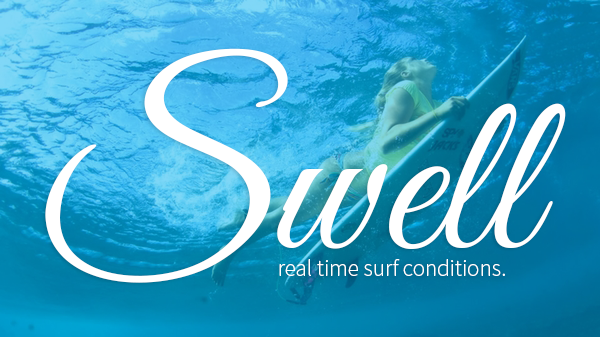
<style>
.page{position:relative;width:600px;height:337px}
.page>*{position:absolute;margin:0}
.t1{font:258.1px "GreatVibes-Regular";color:#ffffff}
.t2{font:229.5px "GreatVibes-Regular";color:#ffffff}
.t3{font:22.9px "SourceSansPro-Light";color:#ffffff}
</style>
<div class="page">
<p class="t1" style="left:45px;top:48px;width:243px;height:235px">S</p>
<p class="t2" style="left:277px;top:103px;width:289px;height:146px">well</p>
<p class="t3" style="left:279px;top:259px;width:226px;height:17px">real time surf conditions.</p>
</div>
